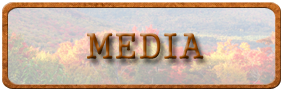
<style>
.page{position:relative;width:283px;height:90px}
.page>*{position:absolute;margin:0}
.t1{font:36px "Gungsuh"}
</style>
<div class="page">
<p class="t1" style="left:87px;top:33px;width:117px;height:26px">MEDIA</p>
</div>
